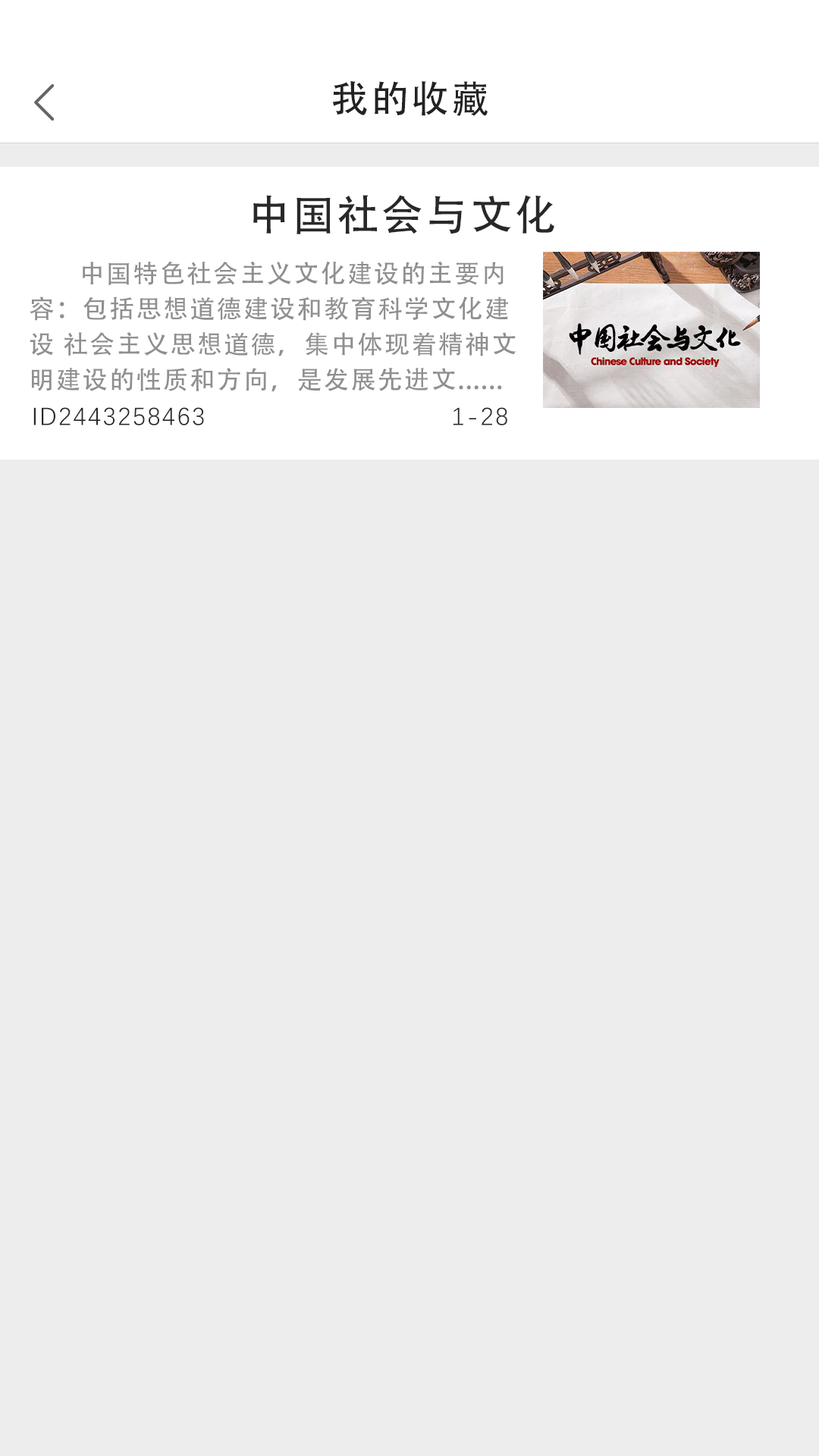
<style>
.page{position:relative;width:819px;height:1456px;background:#eeeded}
.page>*{position:absolute;margin:0}
.t1{font:37.9px "AdobeHeitiStd-Regular";letter-spacing:0.06em;color:#222222}
.t2{font:41.9px "AdobeHeitiStd-Regular";letter-spacing:0.06em;color:#282828}
.t3{font:25.3px/35.4px "AdobeHeitiStd-Regular";letter-spacing:0.06em;color:#8f8f8f}
.t4{font:25.3px "DengXian";letter-spacing:0.06em;color:#282828}
</style>
<div class="page">
<p class="t1" style="left:332px;top:80px;width:156px;height:36px">我的收藏</p>
<p class="t2" style="left:253px;top:195px;width:301px;height:39px">中国社会与文化</p>
<p class="t3" style="left:30px;top:261px;width:486px;height:131px;text-align:justify">中国特色社会主义文化建设的主要内<br>容：包括思想道德建设和教育科学文化建<br>设 社会主义思想道德，集中体现着精神文<br>明建设的性质和方向，是发展先进文......</p>
<p class="t4" style="left:33px;top:407px;width:474px;height:18px">ID2443258463                             1-28</p>
</div>
